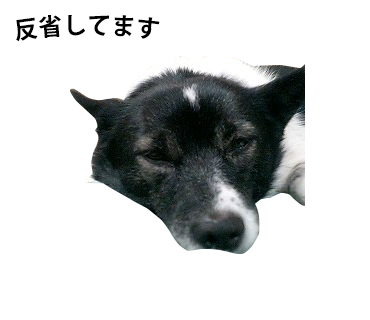
<style>
.page{position:relative;width:370px;height:320px;background:#ffffff}
.page>*{position:absolute;margin:0}
.t1{font:24px "KozGoPr6N-Bold";color:#000000}
</style>
<div class="page">
<p class="t1" style="left:16px;top:15px;width:144px;height:27px">反省してます</p>
</div>
